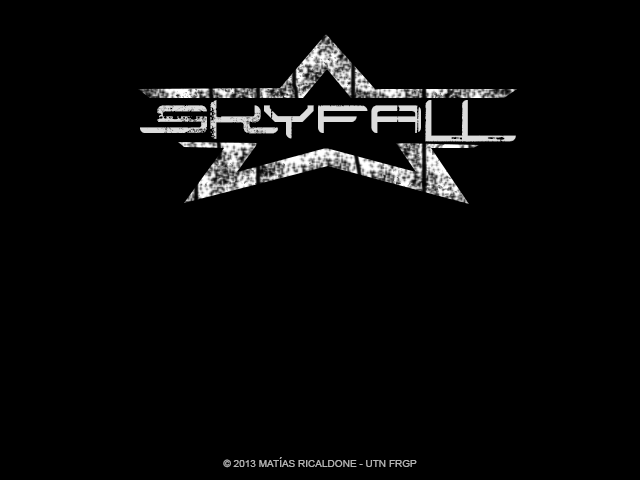
<style>
.page{position:relative;width:640px;height:480px;background:#000000}
.page>*{position:absolute;margin:0}
.t1{font:30px "RyskyLines";color:#dcdcdc}
.t2{font:10px "ArialMT";color:#b4b4b4}
</style>
<div class="page">
<p class="t1" style="left:140px;top:100px;width:376px;height:42px">SKYFALL</p>
<p class="t2" style="left:223px;top:457px;width:194px;height:11px">© 2013 MATÍAS RICALDONE - UTN FRGP</p>
</div>
